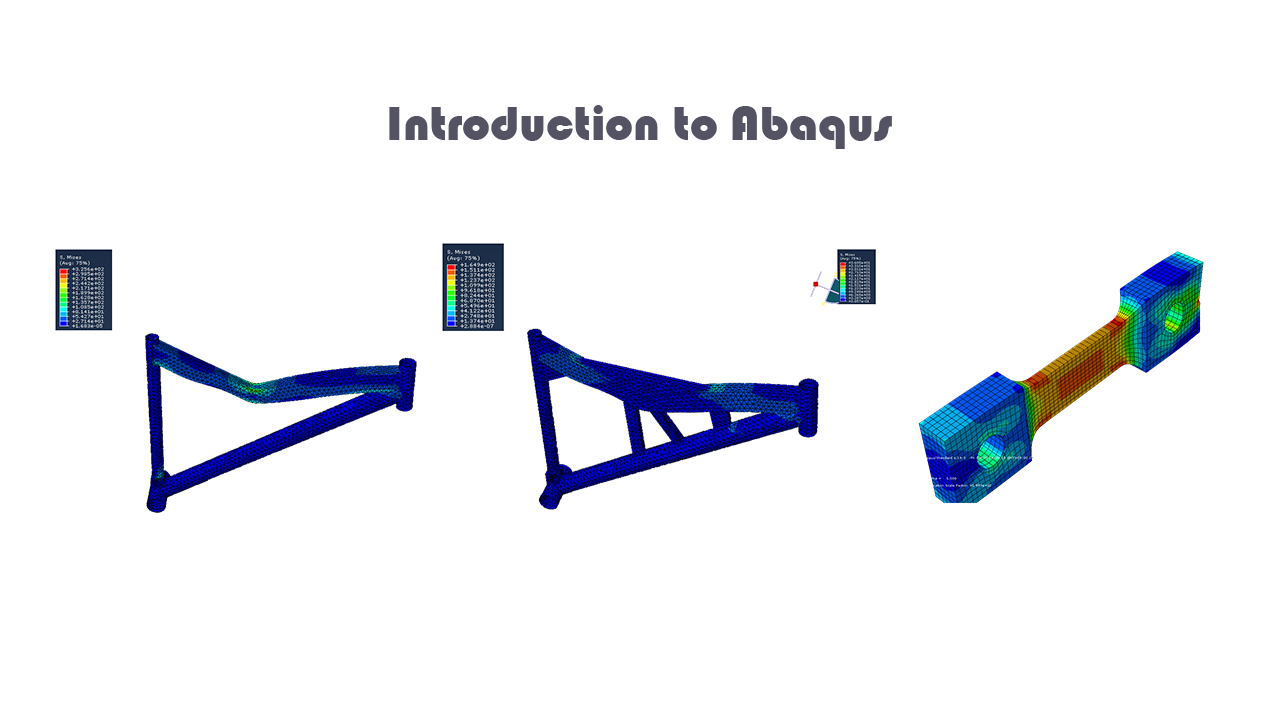
<style>
.page{position:relative;width:1280px;height:720px;background:#ffffff}
.page>*{position:absolute;margin:0}
.t1{font:12px "Bauhaus93";color:#535364}
</style>
<div class="page">
<p class="t1" style="left:389px;top:105px;width:503px;height:44px">Introduction to Abaqus</p>
</div>
